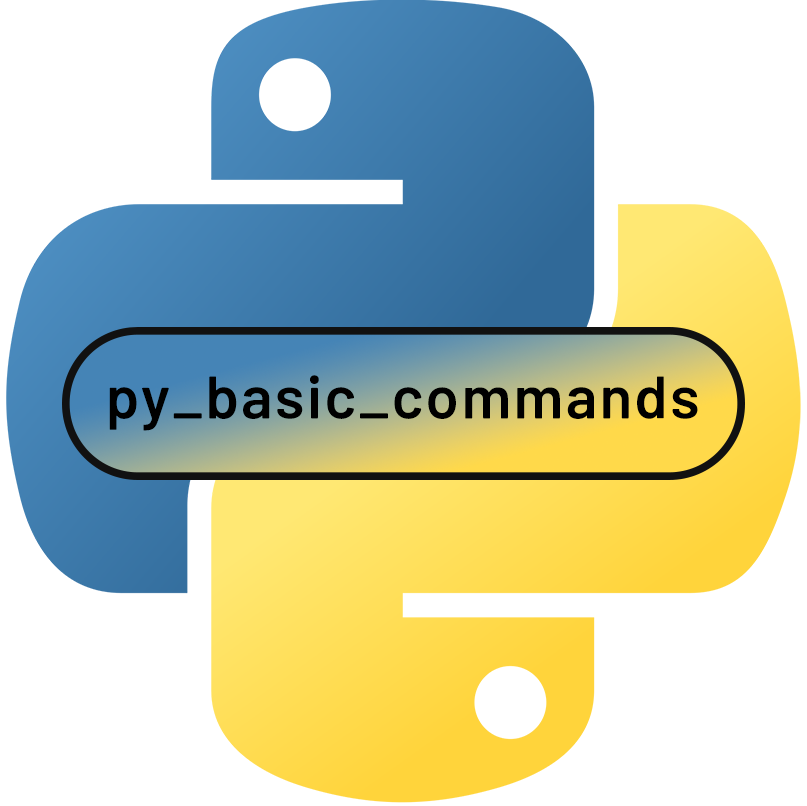
<style>
.page{position:relative;width:807px;height:806px;background:#ffffff}
.page>*{position:absolute;margin:0}
.t1{font:60px "Barlow-SemiBold";letter-spacing:0.04em;color:#000000}
.t2{font:60px "Barlow-SemiBold";letter-spacing:0.04em;color:#ffffff}
</style>
<div class="page">
<p class="t1" style="left:109px;top:375px;width:589px;height:56px"><span class="t2"> </span>py_basic_commands</p>
</div>
